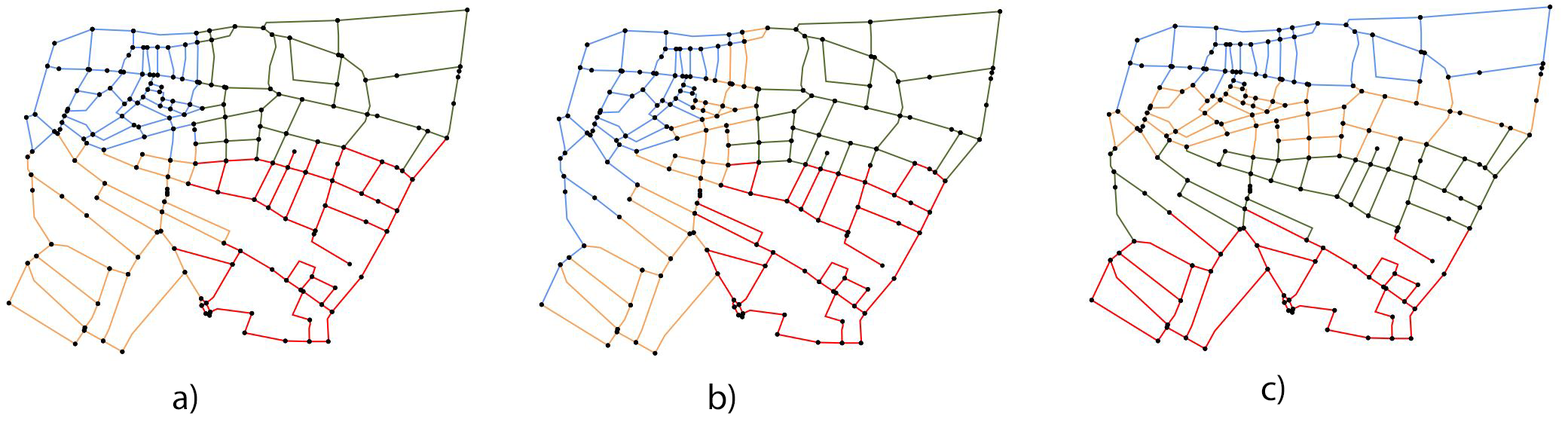
<style>
.page{position:relative;width:1568px;height:434px;background:#ffffff}
.page>*{position:absolute;margin:0}
.t1{font:36.2px "MyriadPro-Regular";color:#000000}
</style>
<div class="page">
<p class="t1" style="left:1261px;top:374px;width:24px;height:31px">c)</p>
<p class="t1" style="left:173px;top:384px;width:24px;height:30px">a)</p>
<p class="t1" style="left:709px;top:384px;width:26px;height:30px">b)</p>
</div>
